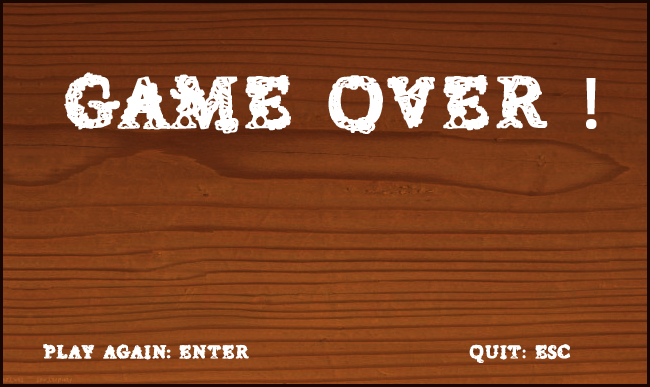
<style>
.page{position:relative;width:650px;height:387px}
.page>*{position:absolute;margin:0}
.t1{font:72px "Chentenario";letter-spacing:-0.02em;color:#ffffff;font-weight:bold}
.t2{font:72px "MyriadPro-Regular";letter-spacing:-0.02em;color:#ffffff;font-weight:bold}
.t3{font:18px "Chentenario";letter-spacing:-0.02em;color:#ffffff;font-weight:bold}
</style>
<div class="page">
<p class="t1" style="left:64px;top:72px;width:533px;height:62px">Game Over <span class="t2">!</span></p>
<p class="t3" style="left:43px;top:344px;width:206px;height:16px">Play aGain: ENTER</p>
<p class="t3" style="left:469px;top:344px;width:102px;height:19px">Quit: ESC</p>
</div>
